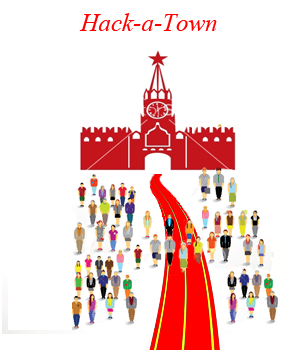
<style>
.page{position:relative;width:300px;height:350px;background:#ffffff}
.page>*{position:absolute;margin:0}
.t1{font:25px "TimesNewRomanPS-ItalicMT";color:#ff0000}
</style>
<div class="page">
<p class="t1" style="left:79px;top:13px;width:138px;height:18px">Hack-a-Town</p>
</div>
